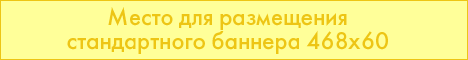
<style>
.page{position:relative;width:468px;height:60px;background:#ffff99}
.page>*{position:absolute;margin:0}
.t1{font:23.9px/24px "FuturisC";color:#edc515}
</style>
<div class="page">
<p class="t1" style="left:67px;top:7px;width:321px;height:47px;text-align:center">Место для размещения<br>стандартного баннера 468х60</p>
</div>
